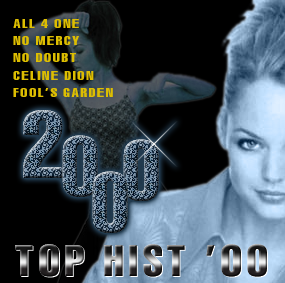
<style>
.page{position:relative;width:285px;height:283px;background:#000000}
.page>*{position:absolute;margin:0}
.t1{font:12.1px/17.3px "VNI-Swiss-Condense-Bold";letter-spacing:0.075em;color:#ddbe01;scale:1.15 1}
</style>
<div class="page">
<p class="t1" style="left:13px;top:19px;width:100px;height:78px">ALL 4 ONE<br>NO MERCY<br>NO DOUBT<br>CELINE DION<br>FOOL’S GARDEN</p>
</div>
